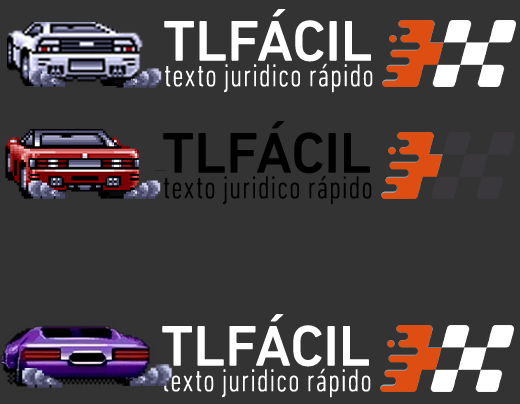
<style>
.page{position:relative;width:520px;height:404px;background:#333333}
.page>*{position:absolute;margin:0}
.t1{font:58.1px "DINNextLTPro-Medium";color:#ffffff}
.t2{font:32px "DINNextLTPro-LightCondensed";letter-spacing:0.015em;color:#ffffff}
.t3{font:58.1px "DINNextLTPro-Medium";color:#000000}
.t4{font:32px "DINNextLTPro-LightCondensed";letter-spacing:0.015em;color:#000000}
</style>
<div class="page">
<p class="t1" style="left:164px;top:9px;width:207px;height:53px">TLFÁCIL</p>
<p class="t2" style="left:165px;top:63px;width:208px;height:30px">texto juridico rápido</p>
<p class="t3" style="left:163px;top:121px;width:207px;height:53px">TLFÁCIL</p>
<p class="t4" style="left:164px;top:175px;width:208px;height:30px">texto juridico rápido</p>
<p class="t1" style="left:162px;top:314px;width:207px;height:53px">TLFÁCIL</p>
<p class="t2" style="left:163px;top:368px;width:208px;height:30px">texto juridico rápido</p>
</div>
